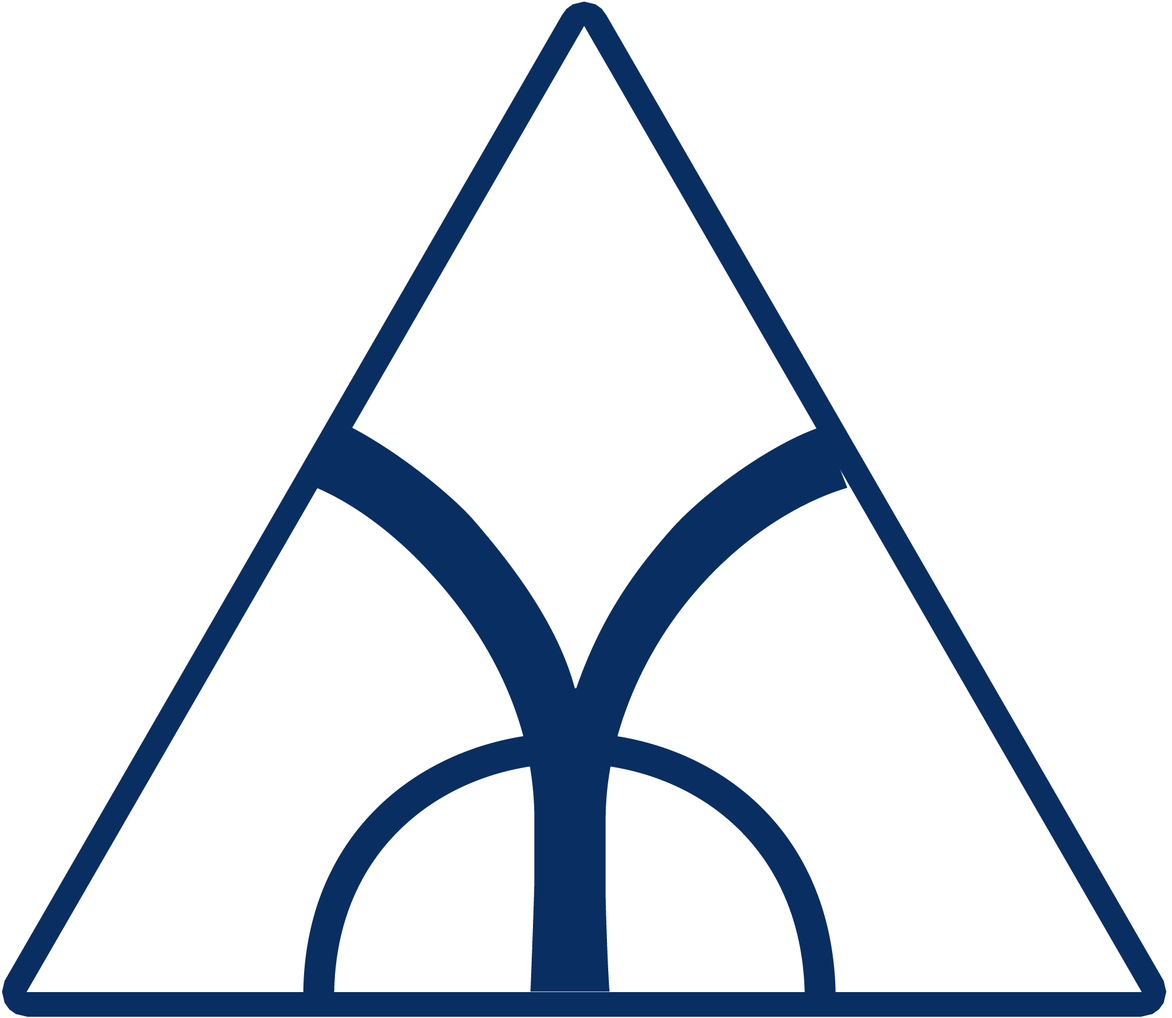
<style>
.page{position:relative;width:1172px;height:1018px;background:#ffffff}
.page>*{position:absolute;margin:0}
.t1{font:789.4px "LithosPro-Regular";letter-spacing:0.005em;color:#092e62}
.t2{font:616.7px "LithosPro-Regular";letter-spacing:0.005em;color:#092e62}
</style>
<div class="page">
<p class="t1" style="left:316px;top:426px;width:531px;height:566px">Y</p>
<p class="t2" style="left:303px;top:732px;width:533px;height:262px;rotate:-1deg">_</p>
</div>
